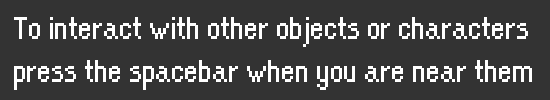
<style>
.page{position:relative;width:550px;height:100px;background:#333333}
.page>*{position:absolute;margin:0}
.t1{font:36px "OrangeKid-Regular";color:#ffffff}
</style>
<div class="page">
<p class="t1" style="left:14px;top:17px;width:518px;height:73px">To interact with other objects or characters <br>press the spacebar when you are near them</p>
</div>
